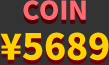
<style>
.page{position:relative;width:109px;height:65px;background:#333333}
.page>*{position:absolute;margin:0}
.t1{font:26px "NotoSansCJKsc-Black";color:#ff6972}
.t2{font:36px "NotoSansCJKsc-Black";color:#ffd100;text-transform:uppercase}
.t3{font:36px "NotoSansCJKsc-Black";color:#ffd100}
</style>
<div class="page">
<p class="t1" style="left:23px;top:0px;width:63px;height:20px">COIN</p>
<p class="t2" style="left:0px;top:32px;width:109px;height:29px"><span class="t3">¥</span>5689</p>
</div>
